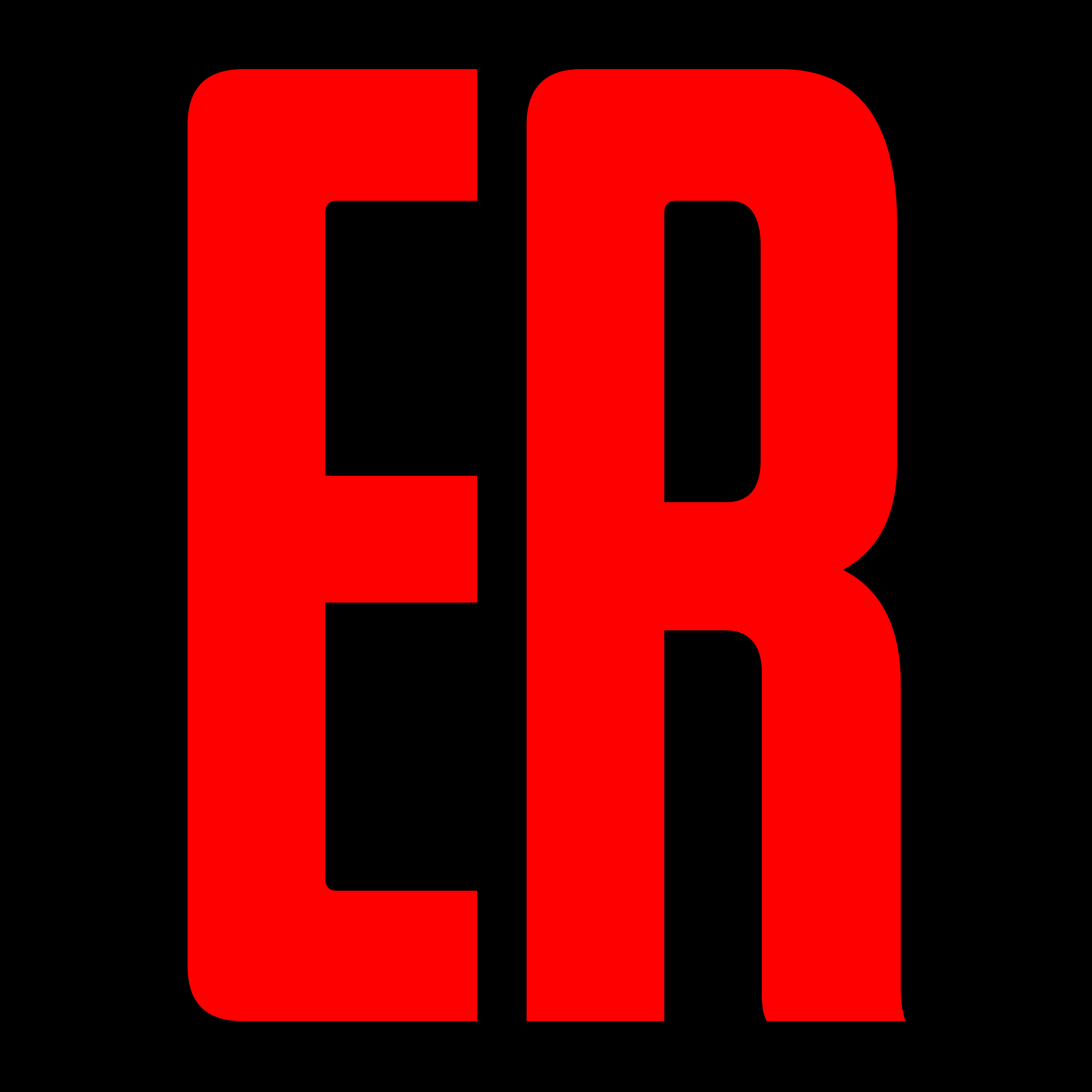
<style>
.page{position:relative;width:1092px;height:1092px;background:#000000}
.page>*{position:absolute;margin:0}
.t1{font:1206.4px "BitcrusherCdRg-Bold";color:#ff0000}
</style>
<div class="page">
<p class="t1" style="left:187px;top:69px;width:719px;height:952px">ER</p>
</div>
